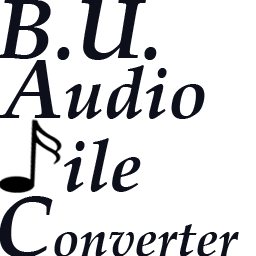
<style>
.page{position:relative;width:256px;height:256px;background:#ffffff}
.page>*{position:absolute;margin:0}
.t1{font:85px "PalatinoLinotype-BoldItalic";color:#0d101a}
.t2{font:72px "PalatinoLinotype-BoldItalic";color:#0d101a}
.t3{font:50px "PalatinoLinotype-BoldItalic";color:#0d101a}
</style>
<div class="page">
<p class="t1" style="left:0px;top:0px;width:157px;height:60px">B.U.</p>
<p class="t2" style="left:0px;top:60px;width:205px;height:59px"><span class="t1">A</span>udio</p>
<p class="t2" style="left:64px;top:138px;width:77px;height:54px">ile</p>
<p class="t3" style="left:0px;top:196px;width:239px;height:62px"><span class="t1">C</span>onverter</p>
</div>
